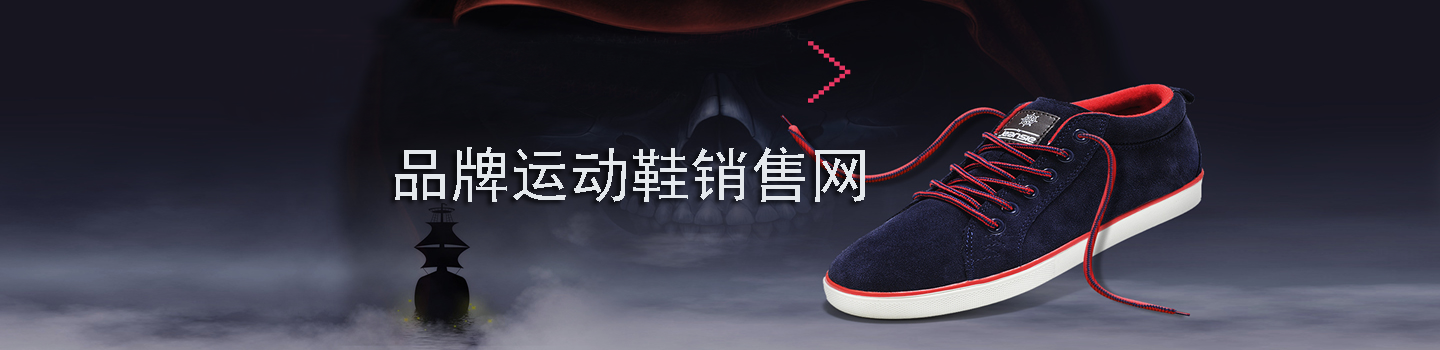
<style>
.page{position:relative;width:1440px;height:350px}
.page>*{position:absolute;margin:0}
.t1{font:60px "SimHei";color:#e4e8ec}
</style>
<div class="page">
<p class="t1" style="left:395px;top:147px;width:470px;height:55px">品牌运动鞋销售网</p>
</div>
